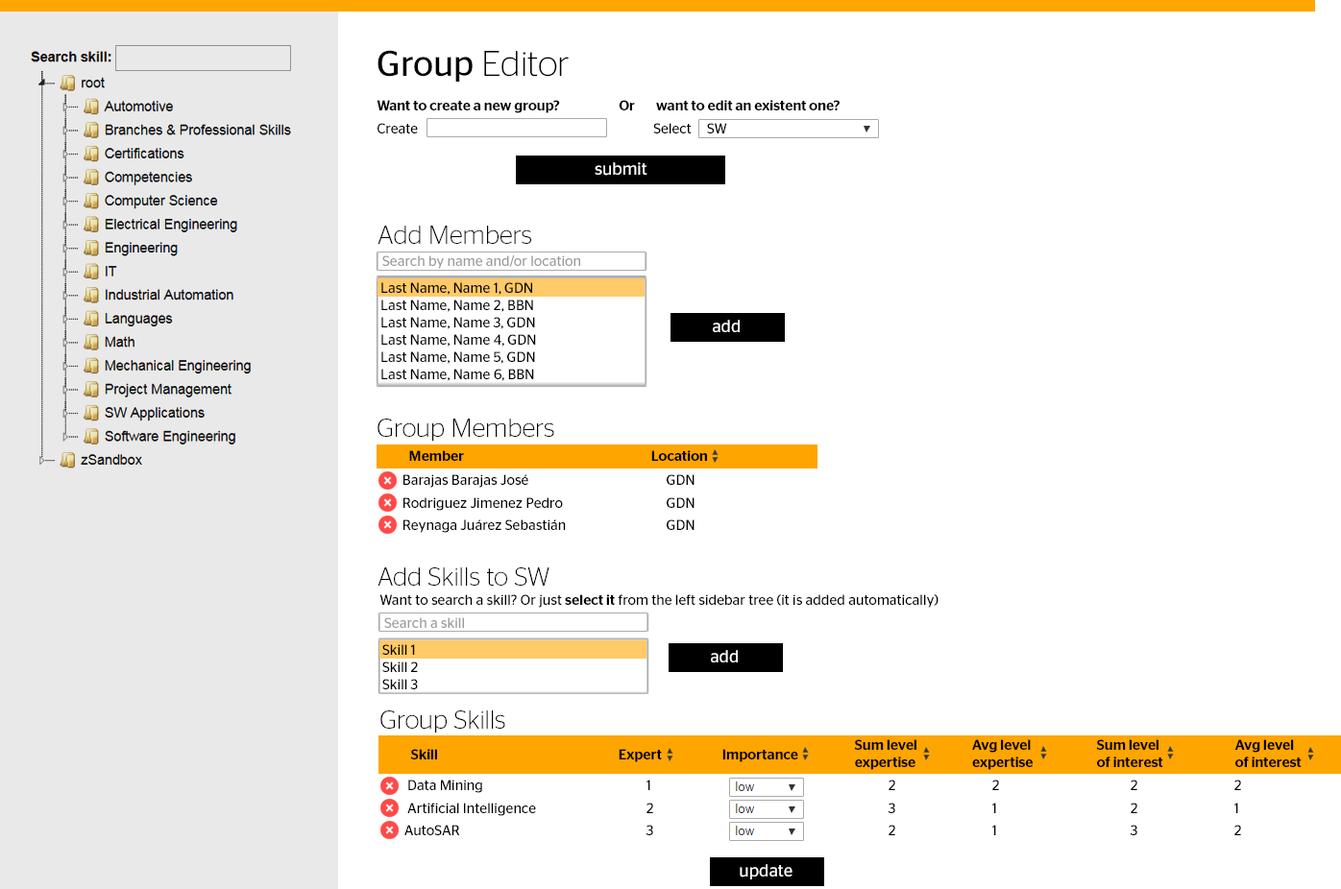
<style>
.page{position:relative;width:1341px;height:889px;background:#ffffff}
.page>*{position:absolute;margin:0}
.t1{font:35.7px "ContinentalStagSans-Light";color:#000000}
.t2{font:35.7px "ContinentalStagSans-Book";color:#000000}
.t3{font:14.4px "ContinentalStagSans-Medium";color:#000000}
.t4{font:14.4px "ContinentalStagSans-Book";color:#000000}
.t5{font:17.4px "ContinentalStagSans-Book";color:#ffffff}
.t6{font:25.9px "ContinentalStagSans-Light";color:#000000}
.t7{font:14.4px "ContinentalStagSans-Book";color:#9a9a9a}
.t8{font:14.4px/22.1px "ContinentalStagSans-Book";color:#000000}
</style>
<div class="page">
<p class="t1" style="left:377px;top:50px;width:192px;height:32px"><span class="t2">Group </span>Editor</p>
<p class="t3" style="left:376px;top:100px;width:463px;height:13px">Want to create a new group?  Or  want to edit an existent one?</p>
<p class="t4" style="left:377px;top:123px;width:350px;height:11px">Create        Select     SW</p>
<p class="t5" style="left:595px;top:162px;width:52px;height:14px">submit</p>
<p class="t6" style="left:377px;top:226px;width:154px;height:18px">Add Members</p>
<p class="t7" style="left:382px;top:255px;width:198px;height:14px">Search by name and/or location</p>
<p class="t4" style="left:381px;top:282px;width:155px;height:99px"><span class="t7"><br></span>Last Name, Name 1, GDN<br>Last Name, Name 2, BBN<br>Last Name, Name 3, GDN<br>Last Name, Name 4, GDN<br>Last Name, Name 5, GDN<br>Last Name, Name 6, BBN</p>
<p class="t5" style="left:713px;top:320px;width:27px;height:12px">add</p>
<p class="t6" style="left:377px;top:419px;width:177px;height:23px">Group Members</p>
<p class="t3" style="left:409px;top:450px;width:298px;height:11px">Member      Location</p>
<p class="t8" style="left:403px;top:474px;width:291px;height:59px"><span class="t4">Barajas Barajas José</span>           GDN<br>Rodriguez Jimenez Pedro          GDN<br>Reynaga Juárez Sebastián          GDN</p>
<p class="t6" style="left:377px;top:568px;width:172px;height:18px">Add Skills to SW</p>
<p class="t4" style="left:379px;top:595px;width:559px;height:13px">Want to search a skill? Or just <span class="t3">select it</span> from the left sidebar tree (it is added automatically)</p>
<p class="t7" style="left:384px;top:618px;width:80px;height:10px">Search a skill</p>
<p class="t4" style="left:382px;top:644px;width:36px;height:46px">Skill 1<br>Skill 2<br>Skill 3</p>
<p class="t5" style="left:711px;top:650px;width:27px;height:13px">add</p>
<p class="t6" style="left:380px;top:711px;width:125px;height:23px">Group Skills</p>
<p class="t3" style="left:411px;top:749px;width:387px;height:14px">Skill      Expert  Importance</p>
<p class="t3" style="left:855px;top:740px;width:446px;height:30px">Sum level       Avg level  Sum level    Avg level<br>             expertise       expertise  of interest   of interest</p>
<p class="t8" style="left:404px;top:780px;width:837px;height:56px"><span class="t4"> </span>Data Mining     1        2   2    2   2<br> Artificial Intelligence    2       3   1    2   1<br>AutoSAR      3       2   1    3   2</p>
<p class="t5" style="left:740px;top:864px;width:52px;height:16px">update</p>
</div>
